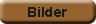
<style>
.page{position:relative;width:96px;height:24px;background:#95632f}
.page>*{position:absolute;margin:0}
.t1{font:13.5px "Arial-BoldMT";color:#1b1b1b}
</style>
<div class="page">
<p class="t1" style="left:28px;top:7px;width:39px;height:10px">Bilder</p>
</div>
